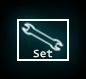
<style>
.page{position:relative;width:86px;height:79px}
.page>*{position:absolute;margin:0}
.t1{font:11.1px "Consolas";letter-spacing:0.05em;color:#ffffff}
</style>
<div class="page">
<p class="t1" style="left:33px;top:49px;width:20px;height:9px">Set</p>
</div>
